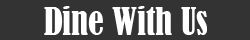
<style>
.page{position:relative;width:250px;height:40px;background:#333333}
.page>*{position:absolute;margin:0}
.t1{font:34.7px "BernardMT-Condensed";color:#ffffff}
</style>
<div class="page">
<p class="t1" style="left:44px;top:6px;width:163px;height:29px">Dine With Us</p>
</div>
